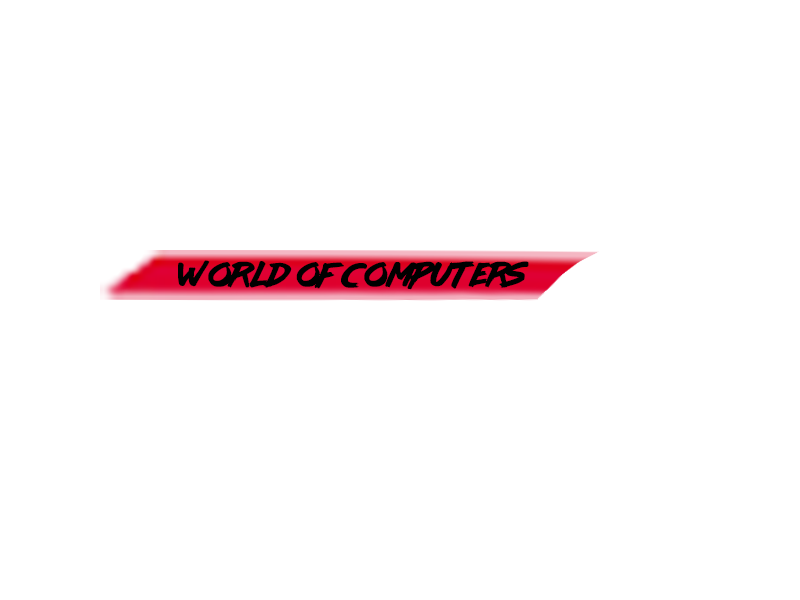
<style>
.page{position:relative;width:800px;height:600px;background:#ffffff}
.page>*{position:absolute;margin:0}
.t1{font:30px "lazer84";color:#000000}
</style>
<div class="page">
<p class="t1" style="left:178px;top:260px;width:351px;height:30px">WORLD OF COMPUTERS</p>
</div>
